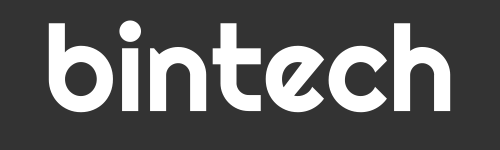
<style>
.page{position:relative;width:500px;height:150px;background:#333333}
.page>*{position:absolute;margin:0}
.t1{font:120px "Righteous-Regular";color:#ffffff}
</style>
<div class="page">
<p class="t1" style="left:48px;top:20px;width:403px;height:93px">bintech</p>
</div>
